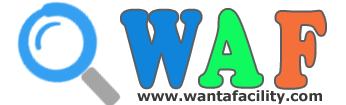
<style>
.page{position:relative;width:346px;height:105px;background:#ffffff}
.page>*{position:absolute;margin:0}
.t1{font:111.1px "CooperBlack";color:#1084da;scale:0.68 1}
.t2{font:111.1px "CooperBlack";color:#10f95e;scale:0.68 1}
.t3{font:111.1px "CooperBlack";color:#f56f3b;scale:0.68 1}
.t4{font:14px "Verdana-Bold";color:#3b3837}
</style>
<div class="page">
<p class="t1" style="left:122px;top:10px;width:79px;height:78px">W</p>
<p class="t2" style="left:200px;top:10px;width:62px;height:77px">A</p>
<p class="t3" style="left:276px;top:11px;width:49px;height:77px">F</p>
<p class="t4" style="left:137px;top:90px;width:185px;height:14px">www.wantafacility.com</p>
</div>
